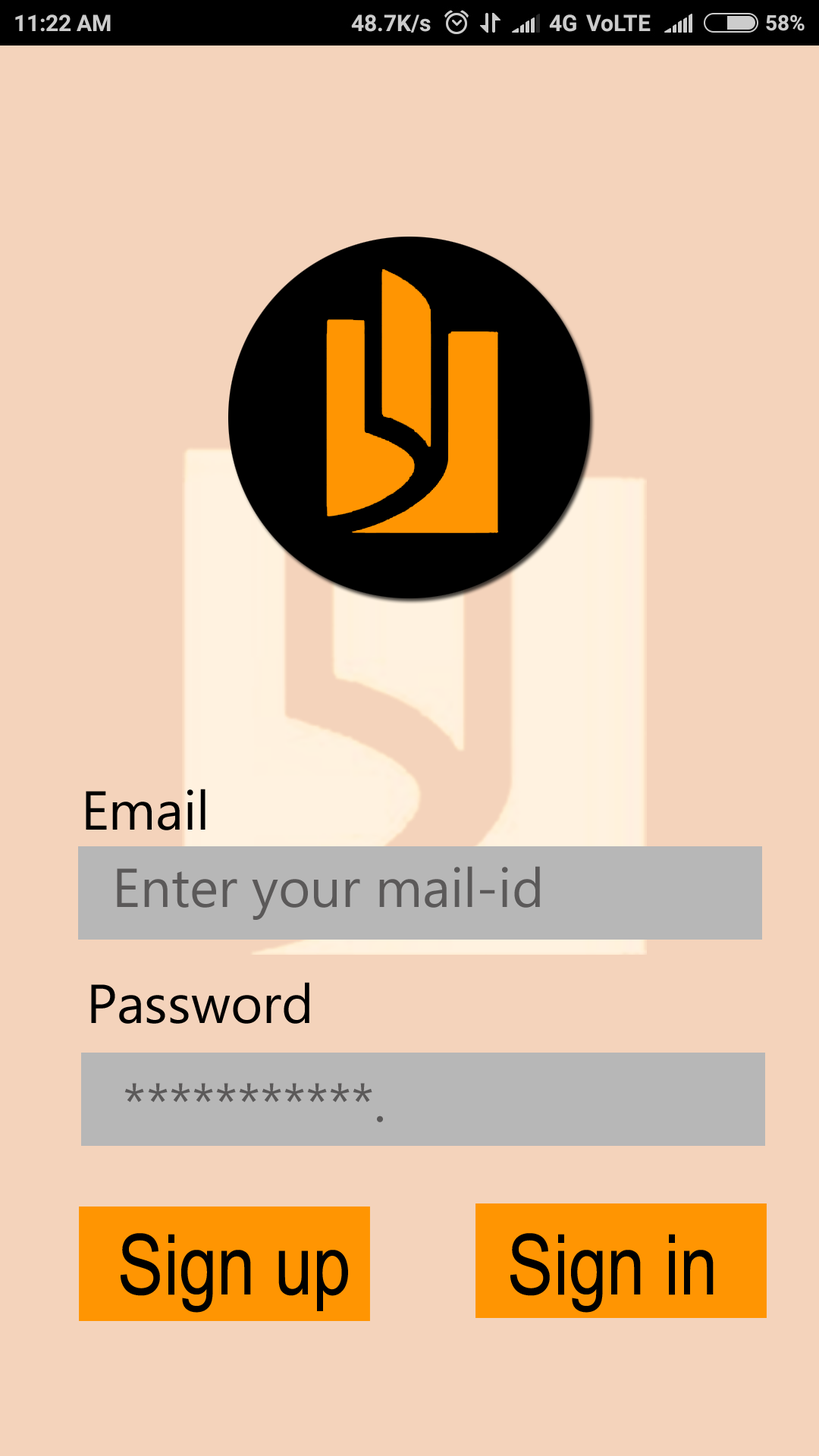
<style>
.page{position:relative;width:819px;height:1456px;background:#f4d3bb}
.page>*{position:absolute;margin:0}
.t1{font:54.6px "Ebrima";color:#000000}
.t2{font:54.6px "Ebrima";color:#5b5959}
.t3{font:84.1px "ArialMT";color:#000000;scale:0.82 1}
</style>
<div class="page">
<p class="t1" style="left:86px;top:789px;width:120px;height:41px">Email</p>
<p class="t2" style="left:117px;top:866px;width:423px;height:54px">Enter your mail-id</p>
<p class="t1" style="left:91px;top:982px;width:218px;height:42px">Password</p>
<p class="t2" style="left:124px;top:1083px;width:259px;height:39px">***********.</p>
<p class="t3" style="left:121px;top:1233px;width:227px;height:80px">Sign up</p>
<p class="t3" style="left:510px;top:1233px;width:204px;height:80px">Sign in</p>
</div>
